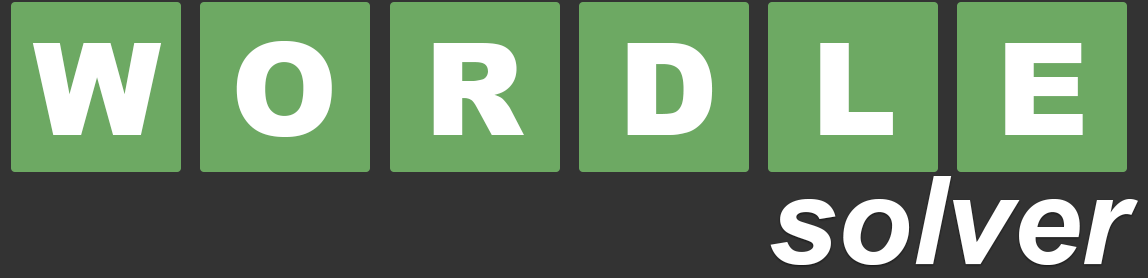
<style>
.page{position:relative;width:1148px;height:278px;background:#6da963}
.page>*{position:absolute;margin:0}
.t1{font:128.4px "Arial-Black";color:#ffffff}
.t2{font:122px "Arial-BoldItalicMT";color:#ffffff}
</style>
<div class="page">
<p class="t1" style="left:236px;top:41px;width:96px;height:96px">O</p>
<p class="t1" style="left:32px;top:43px;width:130px;height:92px">W</p>
<p class="t1" style="left:433px;top:43px;width:91px;height:92px">R</p>
<p class="t1" style="left:627px;top:43px;width:86px;height:92px">D</p>
<p class="t1" style="left:820px;top:43px;width:73px;height:92px">L</p>
<p class="t1" style="left:1005px;top:43px;width:78px;height:92px">E</p>
<p class="t2" style="left:770px;top:176px;width:368px;height:89px">solver</p>
</div>
